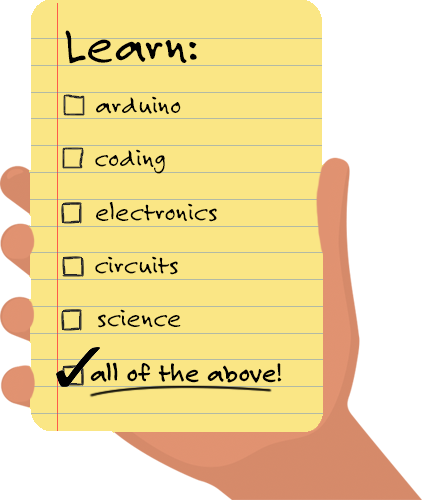
<style>
.page{position:relative;width:422px;height:500px;background:#fae685}
.page>*{position:absolute;margin:0}
.t1{font:52.6px "FeltTipRoman";color:#000000}
.t2{font:27.1px "FeltTipRoman";color:#000000}
.t3{font:27.1px "FeltTipRoman-Bold";color:#000000}
</style>
<div class="page">
<p class="t1" style="left:65px;top:30px;width:132px;height:34px">Learn:</p>
<p class="t2" style="left:96px;top:96px;width:85px;height:18px">arduino</p>
<p class="t2" style="left:95px;top:149px;width:70px;height:25px">coding</p>
<p class="t2" style="left:96px;top:202px;width:121px;height:20px">electronics</p>
<p class="t2" style="left:95px;top:256px;width:83px;height:19px">circuits</p>
<p class="t2" style="left:98px;top:309px;width:83px;height:19px">science</p>
<p class="t3" style="left:90px;top:362px;width:192px;height:21px">all of the above!</p>
</div>
